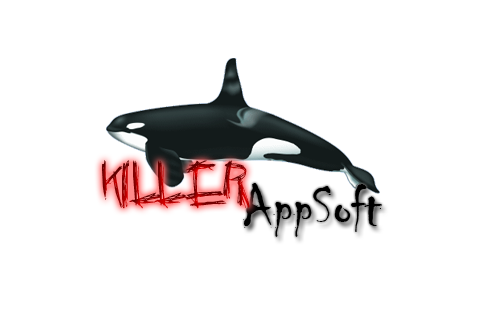
<style>
.page{position:relative;width:480px;height:320px;background:#ffffff}
.page>*{position:absolute;margin:0}
.t1{font:48px "CrazyKiller"}
.t2{font:60px "Chiller-Regular";color:#000000}
</style>
<div class="page">
<p class="t1" style="left:102px;top:160px;width:148px;height:49px">Killer</p>
<p class="t2" style="left:243px;top:183px;width:139px;height:54px">AppSoft</p>
</div>
